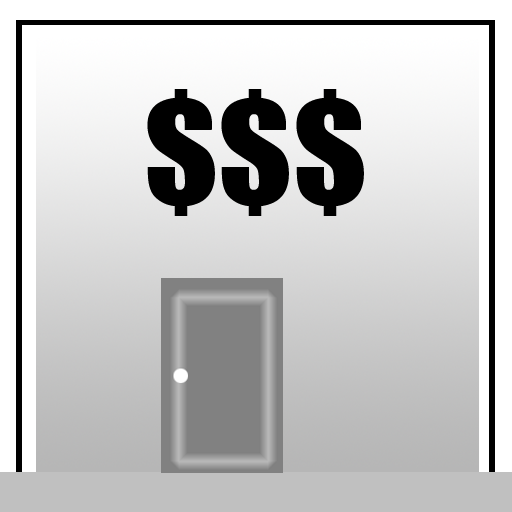
<style>
.page{position:relative;width:512px;height:512px}
.page>*{position:absolute;margin:0}
.t1{font:136.3px "Impact";color:#000000}
</style>
<div class="page">
<p class="t1" style="left:147px;top:89px;width:217px;height:127px">$$$</p>
</div>
